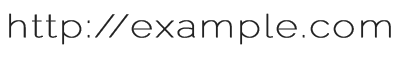
<style>
.page{position:relative;width:400px;height:69px;background:#ffffff}
.page>*{position:absolute;margin:0}
.t1{font:31.9px "Raleway-Thin";letter-spacing:0.05em;color:#222222;font-weight:bold;scale:1.2 1}
</style>
<div class="page">
<p class="t1" style="left:9px;top:13px;width:382px;height:32px">http://example.com</p>
</div>
